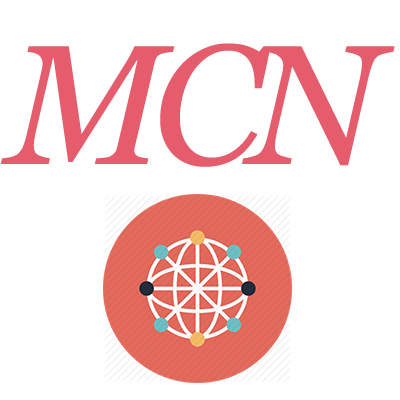
<style>
.page{position:relative;width:400px;height:400px;background:#ffffff}
.page>*{position:absolute;margin:0}
.t1{font:170px "Georgia-Italic";letter-spacing:-0.075em;color:#e55c6d}
</style>
<div class="page">
<p class="t1" style="left:0px;top:43px;width:395px;height:124px">MCN</p>
</div>
